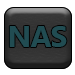
<style>
.page{position:relative;width:75px;height:75px;background:#ffffff}
.page>*{position:absolute;margin:0}
.t1{font:30px "SegoeUI-Bold";letter-spacing:-0.025em;color:#214c52}
</style>
<div class="page">
<p class="t1" style="left:9px;top:26px;width:58px;height:21px">NAS</p>
</div>
